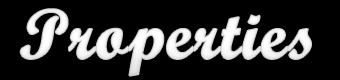
<style>
.page{position:relative;width:340px;height:80px;background:#000000}
.page>*{position:absolute;margin:0}
.t1{font:70px "ScriptMTBold";letter-spacing:0.025em;color:#f8f8f8}
</style>
<div class="page">
<p class="t1" style="left:20px;top:9px;width:291px;height:67px">Properties</p>
</div>
